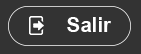
<style>
.page{position:relative;width:141px;height:54px;background:#333333}
.page>*{position:absolute;margin:0}
.t1{font:21.2px "ArialNarrow-Bold";color:#ffffff;scale:1.18 1}
</style>
<div class="page">
<p class="t1" style="left:67px;top:17px;width:44px;height:15px">Salir</p>
</div>
